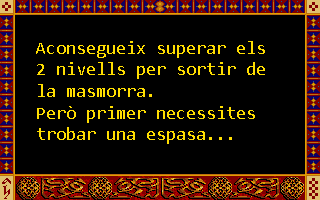
<style>
.page{position:relative;width:320px;height:200px;background:#000000}
.page>*{position:absolute;margin:0}
.t1{font:18px "Consolas";color:#ffde00}
</style>
<div class="page">
<p class="t1" style="left:36px;top:41px;width:229px;height:103px">Aconsegueix superar els<br>2 nivells per sortir de<br>la masmorra.<br>Però primer necessites <br>trobar una espasa...</p>
</div>
